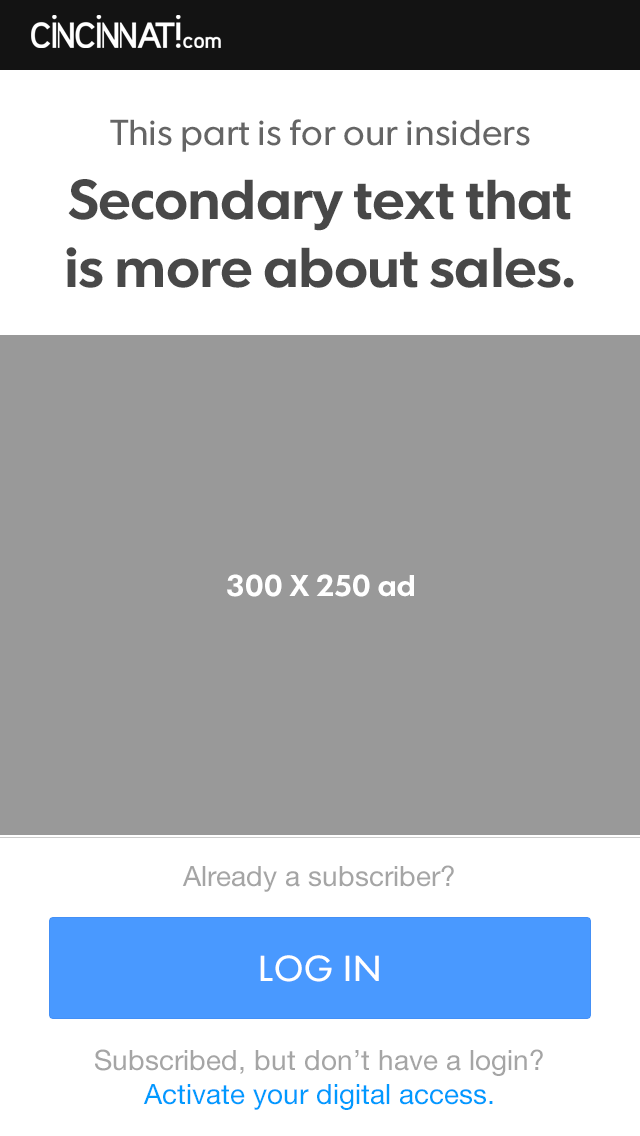
<style>
.page{position:relative;width:640px;height:1136px;background:#999999}
.page>*{position:absolute;margin:0}
.t1{font:36px "FuturaToday-Normal";letter-spacing:-0.01em;color:#656565}
.t2{font:56px/68px "FuturaToday-DemiBold";letter-spacing:-0.015em;color:#484848}
.t3{font:30px "FuturaToday-DemiBold";color:#ffffff}
.t4{font:28px "HelveticaNeue";color:#a5a5a5}
.t5{font:36px "FuturaToday-Normal";letter-spacing:0.025em;color:#ffffff}
.t6{font:28px/33.6px "HelveticaNeue";color:#a5a5a5}
.t7{font:28px/33.6px "HelveticaNeue";color:#009aff}
</style>
<div class="page">
<p class="t1" style="left:110px;top:119px;width:420px;height:33px">This part is for our insiders</p>
<p class="t2" style="left:66px;top:179px;width:508px;height:109px;text-align:center">Secondary text that is more about sales.</p>
<p class="t3" style="left:227px;top:574px;width:187px;height:23px">300 X 250 ad</p>
<p class="t4" style="left:182px;top:865px;width:272px;height:27px">Already a subscriber?</p>
<p class="t5" style="left:260px;top:955px;width:119px;height:27px">LOG IN</p>
<p class="t6" style="left:95px;top:1049px;width:448px;height:61px;text-align:center">Subscribed, but don’t have a login?<span class="t7"> <br>Activate your digital access.</span></p>
</div>
